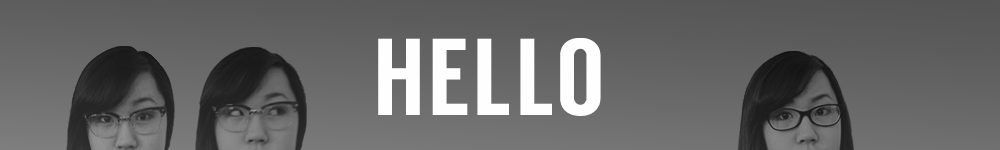
<style>
.page{position:relative;width:1000px;height:150px}
.page>*{position:absolute;margin:0}
.t1{font:108.3px "Langdon";letter-spacing:0.025em;color:#fefefe}
</style>
<div class="page">
<p class="t1" style="left:378px;top:38px;width:223px;height:78px">HELLO</p>
</div>
